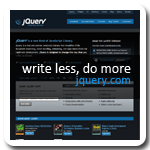
<style>
.page{position:relative;width:150px;height:150px}
.page>*{position:absolute;margin:0}
.t1{font:14px/12px "Calibri";color:#ffffff}
.t2{font:12px/12px "Calibri";color:#1489d5}
</style>
<div class="page">
<p class="t1" style="left:22px;top:63px;width:109px;height:23px">write less, do more<br>                 <span class="t2">jquery.com</span></p>
</div>
